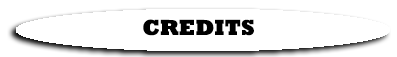
<style>
.page{position:relative;width:397px;height:57px;background:#ffffff}
.page>*{position:absolute;margin:0}
.t1{font:22px "Rockwell-ExtraBold";color:#000000}
</style>
<div class="page">
<p class="t1" style="left:143px;top:19px;width:111px;height:17px">CREDITS</p>
</div>
